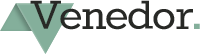
<style>
.page{position:relative;width:200px;height:54px;background:#ffffff}
.page>*{position:absolute;margin:0}
.t1{font:50px "Rokkitt";letter-spacing:-0.025em;color:#282926}
.t2{font:50px "Rokkitt";letter-spacing:-0.025em;color:#84af9b}
</style>
<div class="page">
<p class="t1" style="left:30px;top:0px;width:170px;height:30px">Venedor<span class="t2">.</span></p>
</div>
